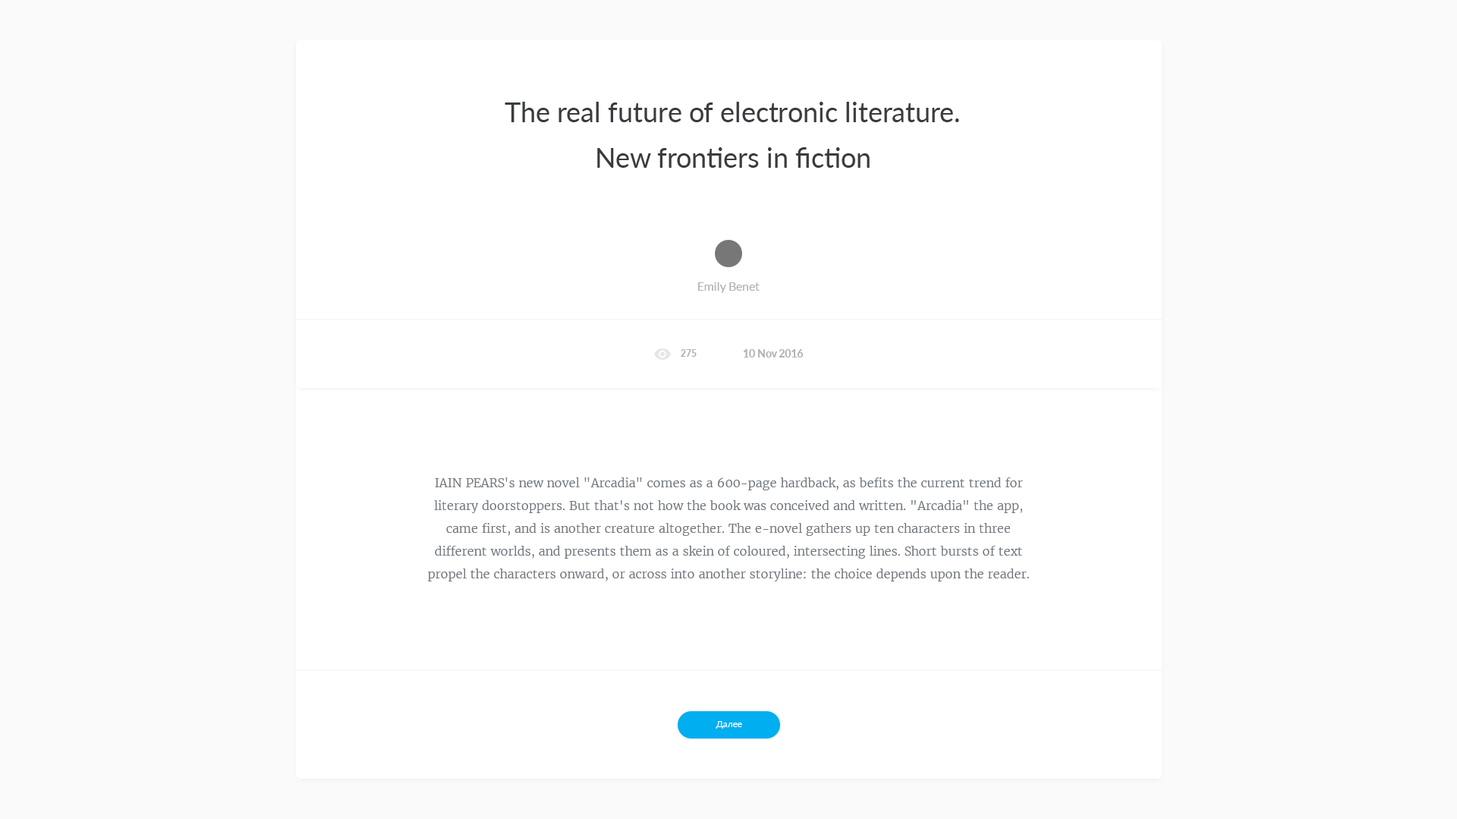
<style>
.page{position:relative;width:1457px;height:819px;background:#ffffff}
.page>*{position:absolute;margin:0}
.t1{font:27.3px/45.5px "Lato-Regular";color:#393c3e}
.t2{font:12.1px "Lato-Regular";color:#b3b3b3}
.t3{font:9.1px "Lato-Bold";color:#b3b3b3}
.t4{font:10.6px "Lato-Bold";color:#b3b3b3}
.t5{font:12.1px/22.8px "Merriweather-Light";color:#71787e}
.t6{font:9.1px "Lato-Regular";color:#ffffff}
</style>
<div class="page">
<p class="t1" style="left:505px;top:102px;width:454px;height:66px;text-align:center">The real future of electronic literature.<br>New frontiers in fiction</p>
<p class="t2" style="left:698px;top:282px;width:61px;height:11px">Emily Benet</p>
<p class="t3" style="left:681px;top:349px;width:15px;height:8px">275</p>
<p class="t4" style="left:744px;top:349px;width:59px;height:8px">10 Nov 2016</p>
<p class="t5" style="left:428px;top:476px;width:601px;height:105px;text-align:center">IAIN PEARS's new novel "Arcadia" comes as a 600-page hardback, as befits the current trend for literary doorstoppers. But that's not how the book was conceived and written. "Arcadia" the app, came first, and is another creature altogether. The e-novel gathers up ten characters in three different worlds, and presents them as a skein of coloured, intersecting lines. Short bursts of text propel the characters onward, or across into another storyline: the choice depends upon the reader.</p>
<p class="t6" style="left:715px;top:721px;width:27px;height:7px">Далее</p>
</div>
